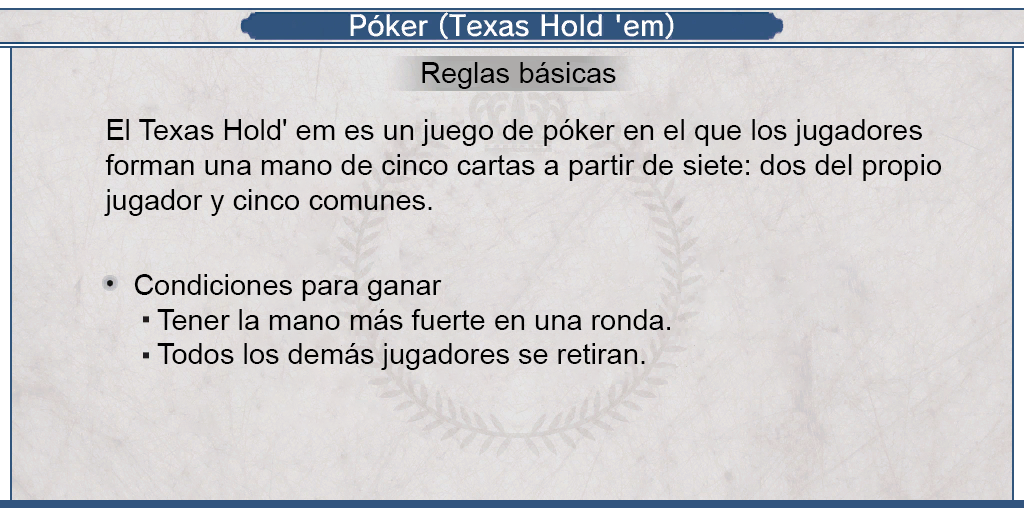
<style>
.page{position:relative;width:1024px;height:512px}
.page>*{position:absolute;margin:0}
.t1{font:29px "ArialMT";color:#000000}
.t2{font:29px/35px "ArialMT";color:#000000}
</style>
<div class="page">
<p class="t1" style="left:422px;top:62px;width:194px;height:27px">Reglas básicas</p>
<p class="t2" style="left:104px;top:119px;width:837px;height:97px">El Texas Hold' em es un juego de póker en el que los jugadores <br>forman una mano de cinco cartas a partir de siete: dos del propio <br>jugador y cinco comunes.</p>
<p class="t1" style="left:134px;top:274px;width:536px;height:96px">Condiciones para ganar<br>   Tener la mano más fuerte en una ronda.<br>   Todos los demás jugadores se retiran.</p>
</div>
